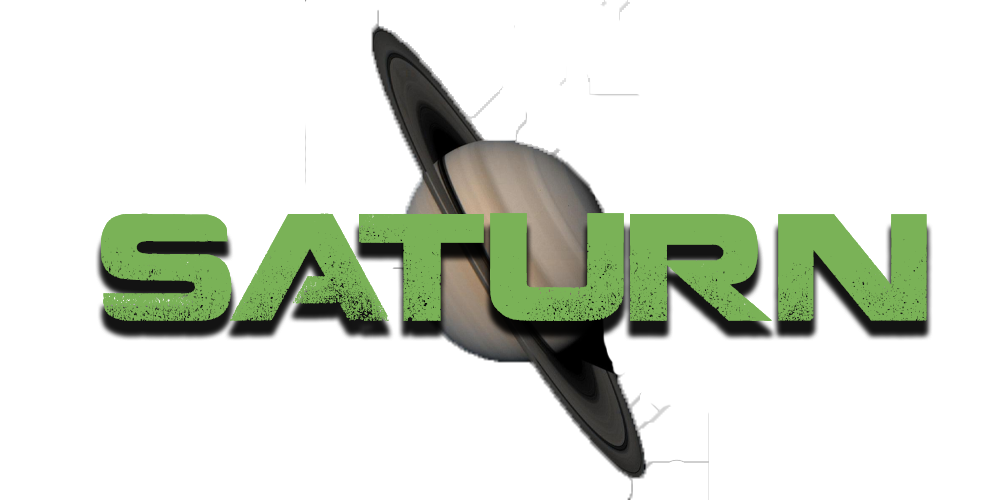
<style>
.page{position:relative;width:1000px;height:500px;background:#ffffff}
.page>*{position:absolute;margin:0}
.t1{font:150px "Coalition";color:#7ab257}
</style>
<div class="page">
<p class="t1" style="left:101px;top:213px;width:826px;height:108px">SATURN</p>
<p class="t1" style="left:101px;top:213px;width:826px;height:108px">SATURN</p>
</div>
